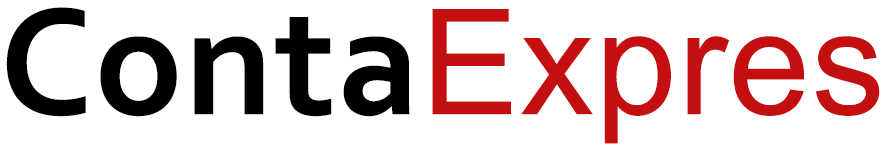
<style>
.page{position:relative;width:887px;height:150px;background:#ffffff}
.page>*{position:absolute;margin:0}
.t1{font:146.7px "ArialMT";letter-spacing:0.01em;color:#c30f0f}
.t2{font:160px "Corbel-Bold";letter-spacing:0.01em;color:#000000}
</style>
<div class="page">
<p class="t1" style="left:6px;top:7px;width:874px;height:137px"><span class="t2">Conta</span>Expres</p>
</div>
